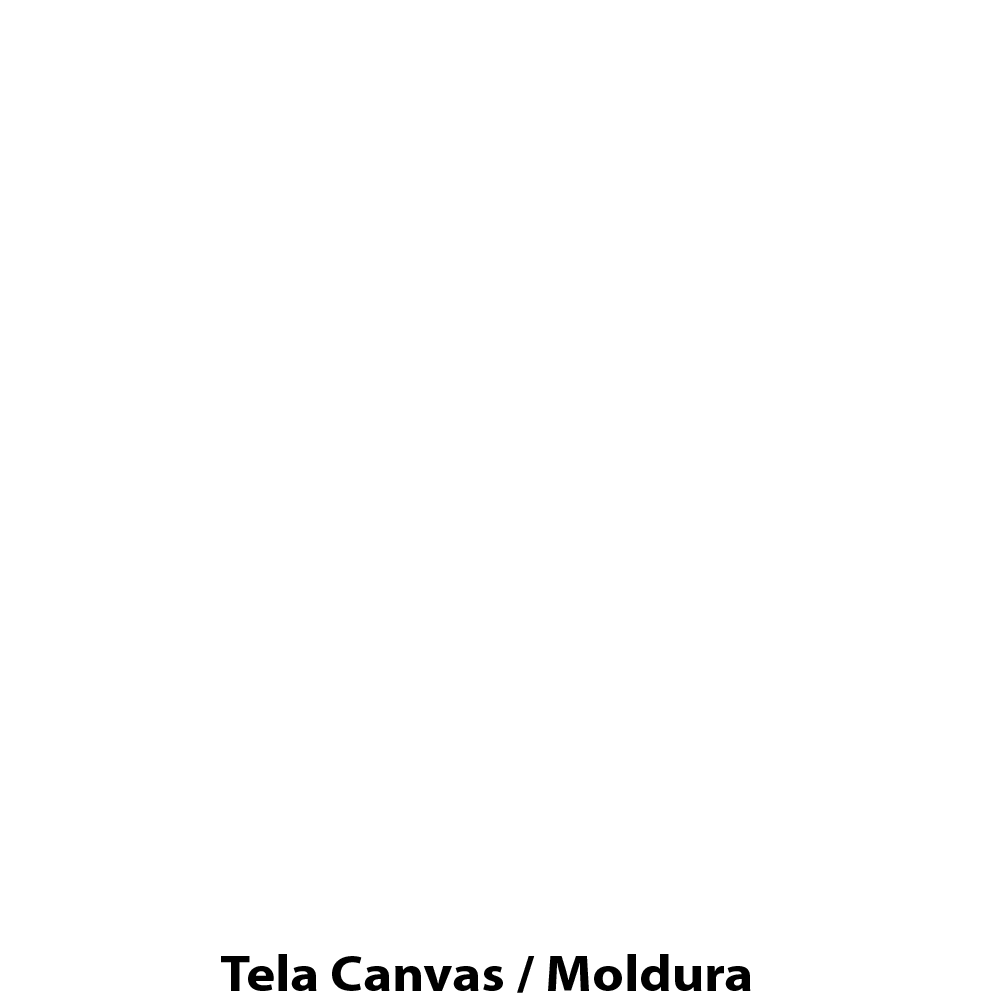
<style>
.page{position:relative;width:1000px;height:1000px;background:#ffffff}
.page>*{position:absolute;margin:0}
.t1{font:50.7px "MyriadPro-Bold";color:#000000;scale:1.09 1}
.t2{font:50.7px "MyriadPro-Bold";color:#ffffff;scale:1.09 1}
</style>
<div class="page">
<p class="t1" style="left:221px;top:954px;width:530px;height:39px"><span class="t2">  </span>Tela Canvas / Moldura</p>
</div>
